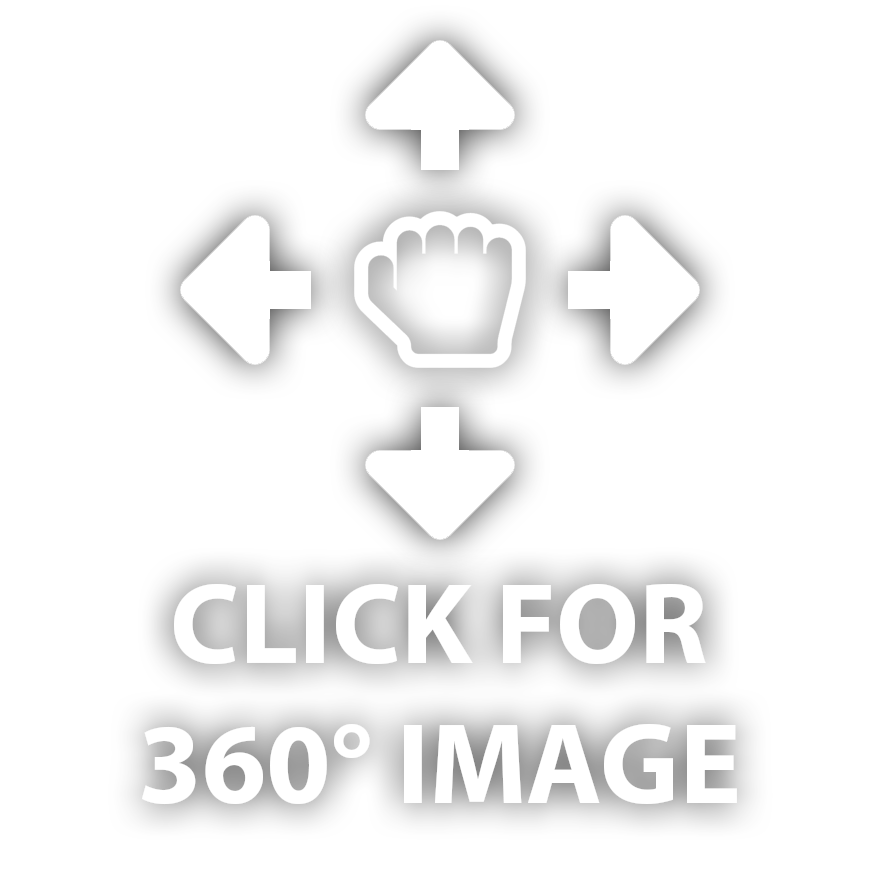
<style>
.page{position:relative;width:880px;height:880px;background:#ffffff}
.page>*{position:absolute;margin:0}
.t1{font:116px "MyriadPro-Bold";color:#ffffff}
</style>
<div class="page">
<p class="t1" style="left:142px;top:584px;width:595px;height:221px;text-align:center">CLICK FOR<br>360° IMAGE</p>
</div>
